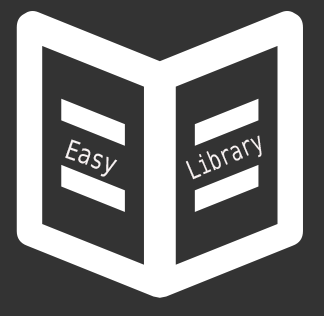
<style>
.page{position:relative;width:324px;height:316px;background:#333333}
.page>*{position:absolute;margin:0}
.t1{font:26.4px "BitstreamVeraSansMono-Roman";color:#f7f1f1;scale:0.72 1}
.t2{font:26.4px "BitstreamVeraSansMono-Roman";color:#f7f1f1;scale:0.83 1}
</style>
<div class="page">
<p class="t1" style="left:185px;top:135px;width:77px;height:45px;rotate:-23deg">Library</p>
<p class="t2" style="left:65px;top:139px;width:53px;height:38px;rotate:19deg">Easy</p>
</div>
